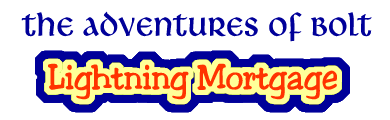
<style>
.page{position:relative;width:390px;height:120px;background:#ffffff}
.page>*{position:absolute;margin:0}
.t1{font:36px "LibraBT-Regular";color:#000099;scale:0.95 1}
.t2{font:36px "Jester-Regular";color:#ff3300;scale:0.95 1}
</style>
<div class="page">
<p class="t1" style="left:21px;top:11px;width:351px;height:31px">The Adventures of Bolt</p>
<p class="t2" style="left:48px;top:63px;width:289px;height:37px">Lightning Mortgage</p>
</div>
